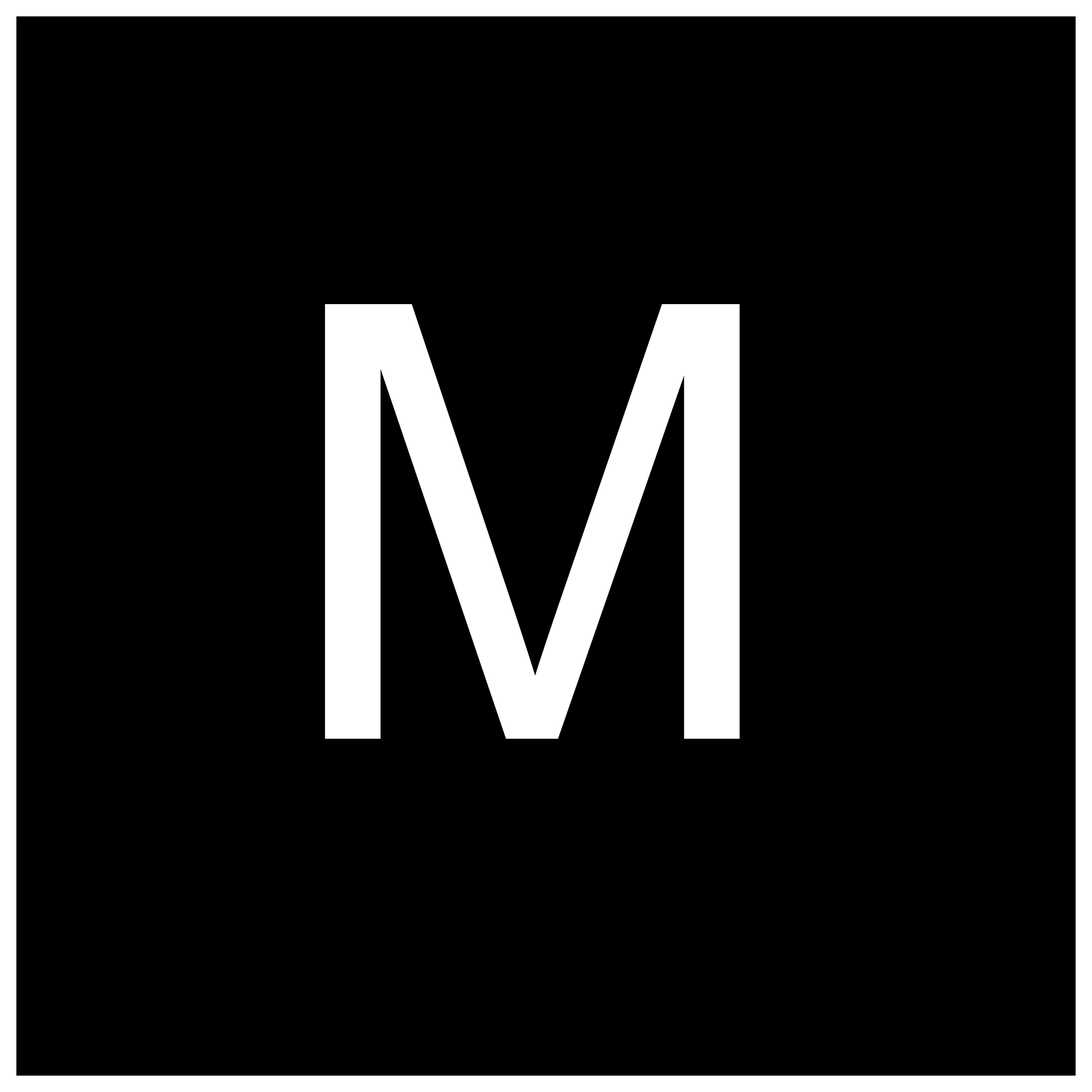
<style>
.page{position:relative;width:1092px;height:1092px;background:#000000}
.page>*{position:absolute;margin:0}
.t1{font:606.7px "ArialMT";color:#ffffff}
</style>
<div class="page">
<p class="t1" style="left:325px;top:304px;width:415px;height:435px">M</p>
</div>
